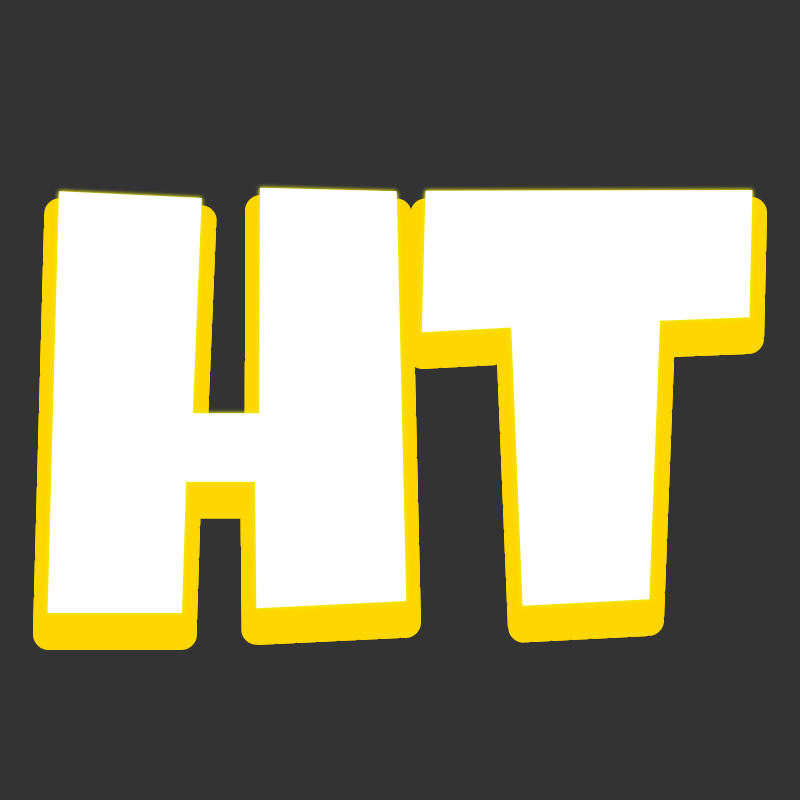
<style>
.page{position:relative;width:800px;height:800px;background:#333333}
.page>*{position:absolute;margin:0}
.t1{font:614.2px "LuckiestGuy-Regular";color:#ffffff}
</style>
<div class="page">
<p class="t1" style="left:47px;top:187px;width:706px;height:426px">ht</p>
</div>
